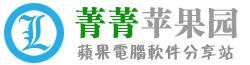
<style>
.page{position:relative;width:250px;height:65px;background:#ffffff}
.page>*{position:absolute;margin:0}
.t1{font:48px "OldEnglishTextMT";letter-spacing:0.09em;color:#25ade8;scale:0.95 1}
.t2{font:32px "FZCSK--GBK1-0";letter-spacing:0.09em;color:#999a99;scale:0.95 1}
.t3{font:32px "FZCSK--GBK1-0";letter-spacing:0.09em;color:#0e930e;scale:0.95 1}
.t4{font:17px "FZZBHFW--GB1-0";letter-spacing:0.09em;color:#8b8e8b;scale:0.95 1}
</style>
<div class="page">
<p class="t1" style="left:19px;top:15px;width:32px;height:36px">L</p>
<p class="t2" style="left:75px;top:7px;width:163px;height:32px"><span class="t3">菁菁</span>苹果园</p>
<p class="t4" style="left:77px;top:44px;width:157px;height:17px">苹果电脑软件分享站</p>
</div>
